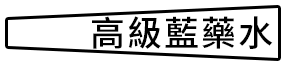
<style>
.page{position:relative;width:286px;height:66px;background:#ffffff}
.page>*{position:absolute;margin:0}
.t1{font:35px "NotoSansCJKtc-Medium";letter-spacing:0.06em;color:#000000}
</style>
<div class="page">
<p class="t1" style="left:92px;top:16px;width:181px;height:33px">高級藍藥水</p>
</div>
